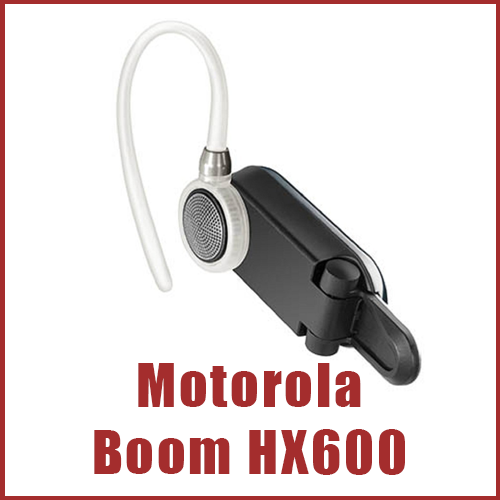
<style>
.page{position:relative;width:500px;height:500px;background:#ffffff}
.page>*{position:absolute;margin:0}
.t1{font:55.6px "Impact";letter-spacing:0.055em;color:#a42d2d}
</style>
<div class="page">
<p class="t1" style="left:94px;top:363px;width:311px;height:112px;text-align:center">Motorola<br>Boom HX600</p>
</div>
